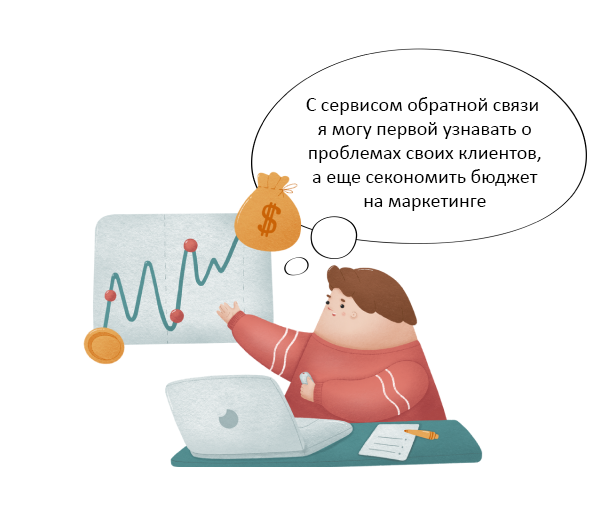
<style>
.page{position:relative;width:600px;height:519px;background:#ffffff}
.page>*{position:absolute;margin:0}
.t1{font:20px "Calibri";color:#000000}
</style>
<div class="page">
<p class="t1" style="left:306px;top:97px;width:235px;height:114px;text-align:center">С сервисом обратной связи<br> я могу первой узнавать о<br> проблемах своих клиентов,<br> а еще секономить бюджет<br> на маркетинге</p>
</div>
